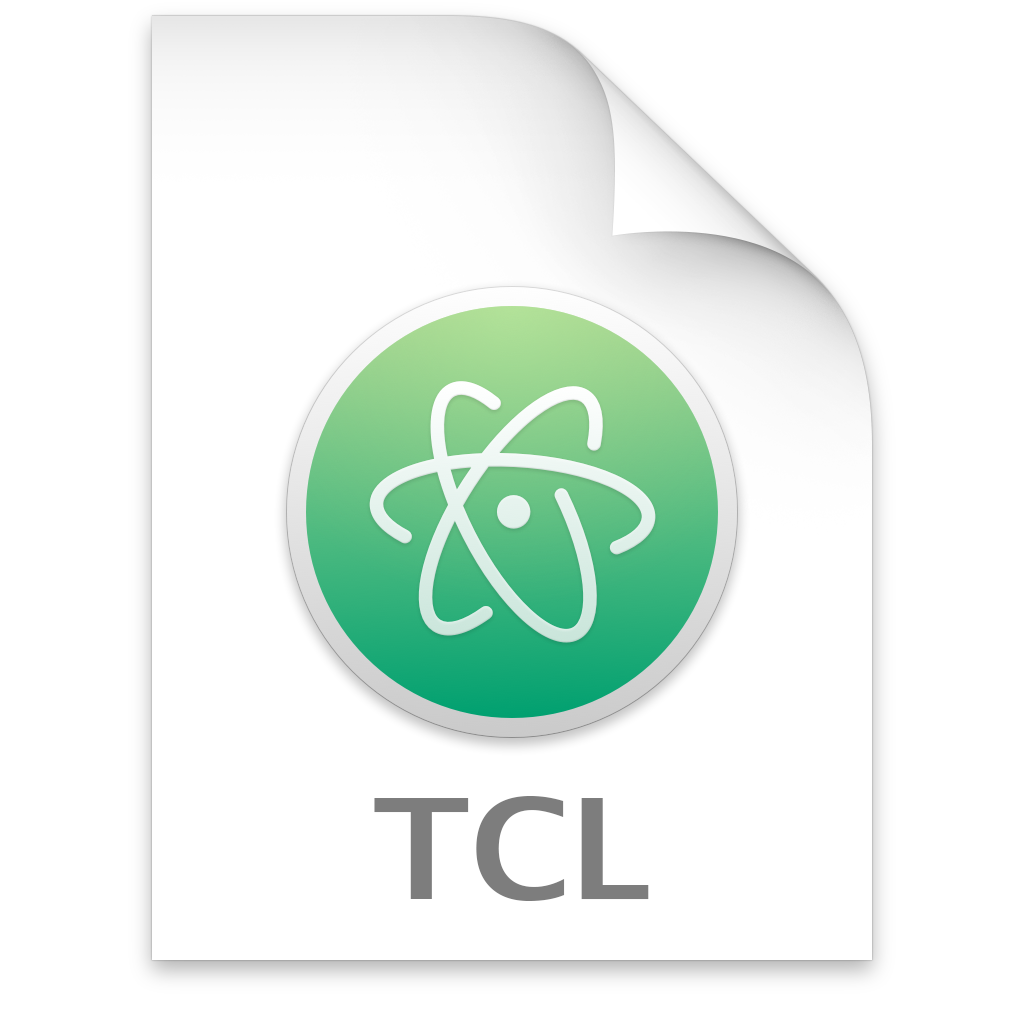
<style>
.page{position:relative;width:1024px;height:1024px;background:#ffffff}
.page>*{position:absolute;margin:0}
.t1{font:140px "LucidaGrande-Bold";color:#7d7d7d}
</style>
<div class="page">
<p class="t1" style="left:374px;top:796px;width:275px;height:105px">TCL</p>
</div>
